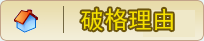
<style>
.page{position:relative;width:204px;height:41px}
.page>*{position:absolute;margin:0}
.t1{font:24px "SimHei";color:#f5e000}
</style>
<div class="page">
<p class="t1" style="left:81px;top:8px;width:92px;height:23px">破格理由</p>
</div>
